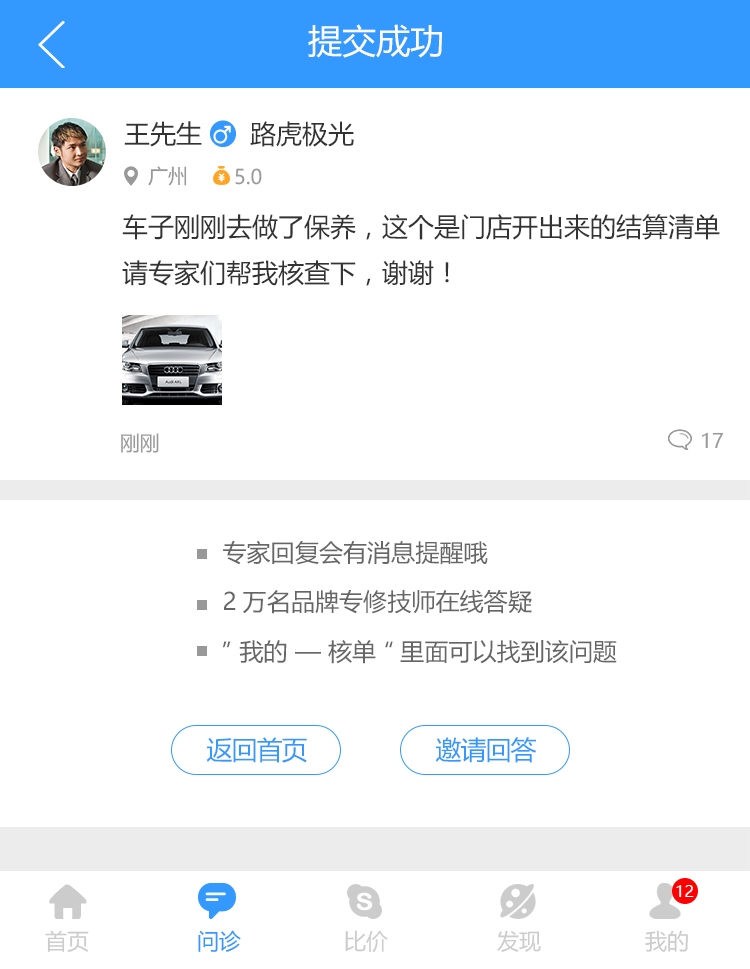
<style>
.page{position:relative;width:750px;height:969px;background:#ffffff}
.page>*{position:absolute;margin:0}
.t1{font:34px "MicrosoftYaHei";color:#ffffff}
.t2{font:26px "MicrosoftYaHei";color:#333333}
.t3{font:20px "MicrosoftYaHei";color:#999999}
.t4{font:24px "MicrosoftYaHei";color:#666666}
.t5{font:26px "MicrosoftYaHei";letter-spacing:-0.04em;color:#3399ff}
.t6{font:16px "MicrosoftYaHei";color:#ffffff}
.t7{font:22px "MicrosoftYaHei";color:#cccccc}
.t8{font:22px "MicrosoftYaHei";color:#3399ff}
</style>
<div class="page">
<p class="t1" style="left:308px;top:24px;width:134px;height:34px">提交成功</p>
<p class="t2" style="left:124px;top:121px;width:78px;height:26px">王先生</p>
<p class="t2" style="left:124px;top:121px;width:78px;height:26px">王先生</p>
<p class="t2" style="left:250px;top:121px;width:104px;height:26px">路虎极光</p>
<p class="t2" style="left:250px;top:121px;width:104px;height:26px">路虎极光</p>
<p class="t3" style="left:148px;top:166px;width:39px;height:20px">广州</p>
<p class="t3" style="left:148px;top:166px;width:39px;height:20px">广州</p>
<p class="t3" style="left:235px;top:168px;width:27px;height:17px">5.0</p>
<p class="t3" style="left:235px;top:168px;width:27px;height:17px">5.0</p>
<p class="t2" style="left:122px;top:214px;width:598px;height:72px">车子刚刚去做了保养，这个是门店开出来的结算清单<br>请专家们帮我核查下，谢谢！</p>
<p class="t3" style="left:121px;top:433px;width:38px;height:20px">刚刚</p>
<p class="t3" style="left:702px;top:432px;width:22px;height:17px">17</p>
<p class="t3" style="left:702px;top:432px;width:22px;height:17px">17</p>
<p class="t4" style="left:223px;top:540px;width:265px;height:25px">专家回复会有消息提醒哦</p>
<p class="t4" style="left:224px;top:590px;width:308px;height:24px">2万名品牌专修技师在线答疑</p>
<p class="t4" style="left:223px;top:640px;width:394px;height:24px">”我的 — 核单“里面可以找到该问题</p>
<p class="t5" style="left:206px;top:737px;width:101px;height:26px">返回首页</p>
<p class="t5" style="left:436px;top:737px;width:101px;height:26px">邀请回答</p>
<p class="t6" style="left:676px;top:885px;width:18px;height:12px">12</p>
<p class="t7" style="left:45px;top:930px;width:44px;height:22px">首页</p>
<p class="t8" style="left:198px;top:930px;width:43px;height:22px">问诊</p>
<p class="t7" style="left:345px;top:930px;width:43px;height:22px">比价</p>
<p class="t7" style="left:497px;top:930px;width:44px;height:22px">发现</p>
<p class="t7" style="left:645px;top:930px;width:43px;height:22px">我的</p>
</div>
